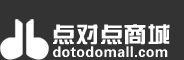
<style>
.page{position:relative;width:184px;height:60px;background:#333333}
.page>*{position:absolute;margin:0}
.t1{font:22.4px "FZZYJW--GB1-0";letter-spacing:0.025em;color:#ffffff;scale:1.04 1}
.t2{font:14.9px "FZZYJW--GB1-0";letter-spacing:0.025em;color:#ffffff;scale:0.95 1}
</style>
<div class="page">
<p class="t1" style="left:53px;top:24px;width:117px;height:21px">点对点商城</p>
<p class="t2" style="left:53px;top:46px;width:115px;height:11px">dotodomall.com</p>
</div>
